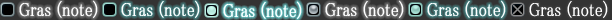
<style>
.page{position:relative;width:612px;height:20px;background:#333333}
.page>*{position:absolute;margin:0}
.t1{font:19px "MS-PMincho";color:#ffffff;font-weight:bold;scale:0.84 1}
</style>
<div class="page">
<p class="t1" style="left:19px;top:0px;width:79px;height:18px">Gras (note)</p>
<p class="t1" style="left:121px;top:0px;width:79px;height:18px">Gras (note)</p>
<p class="t1" style="left:223px;top:1px;width:79px;height:18px">Gras (note)</p>
<p class="t1" style="left:325px;top:0px;width:79px;height:18px">Gras (note)</p>
<p class="t1" style="left:427px;top:0px;width:79px;height:18px">Gras (note)</p>
<p class="t1" style="left:529px;top:0px;width:79px;height:18px">Gras (note)</p>
</div>
